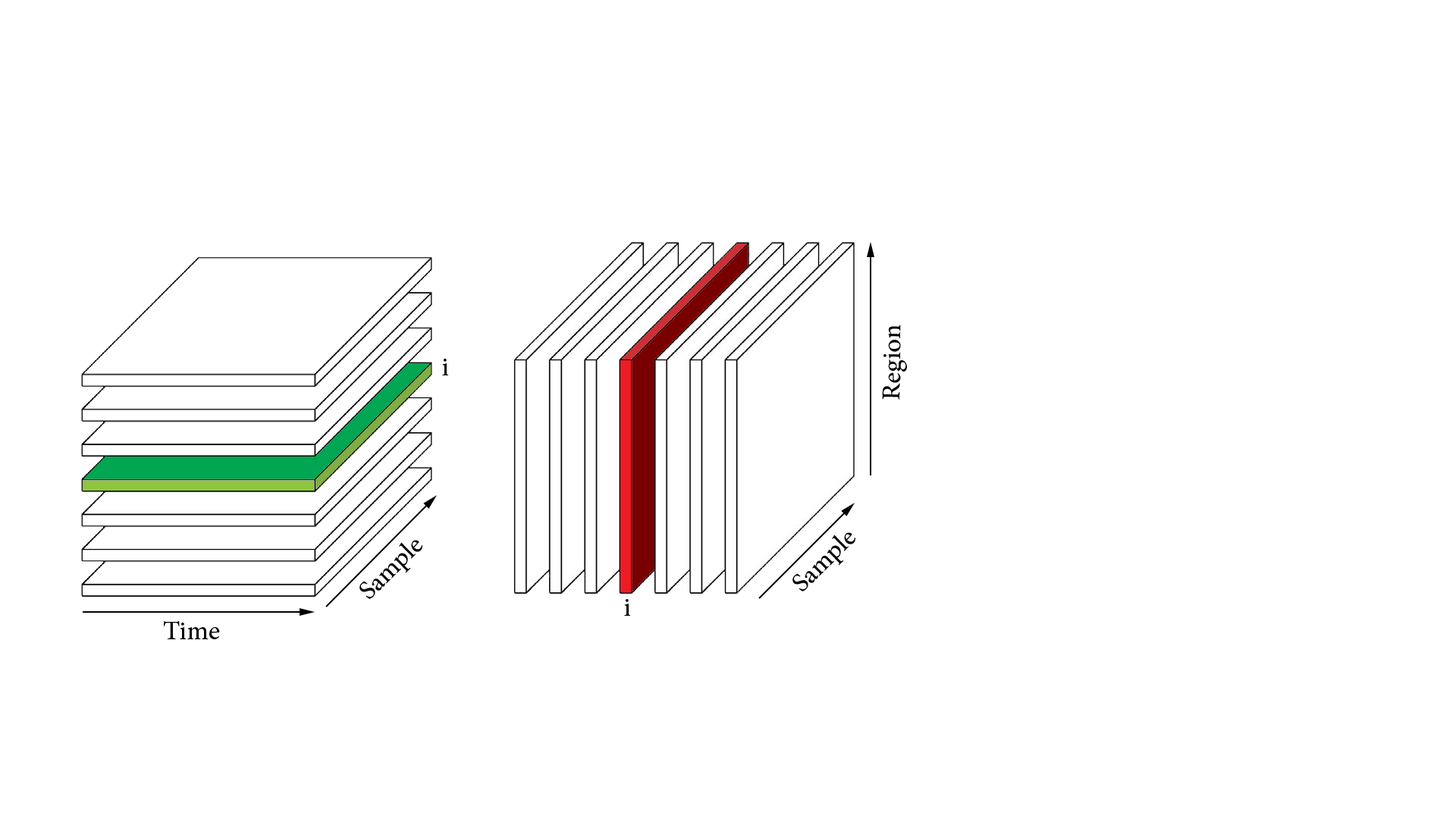
<style>
.page{position:relative;width:1456px;height:819px;background:#ffffff}
.page>*{position:absolute;margin:0}
.t1{font:36.4px "AdobeArabic-Regular";color:#010101}
.t2{font:36.4px "AdobeArabic-Regular";color:#000000}
</style>
<div class="page">
<p class="t1" style="left:882px;top:325px;width:25px;height:75px;rotate:-89deg">Region</p>
<p class="t2" style="left:442px;top:359px;width:6px;height:16px">i</p>
<p class="t1" style="left:792px;top:532px;width:63px;height:59px;rotate:-44deg">Sample</p>
<p class="t1" style="left:359px;top:540px;width:63px;height:59px;rotate:-44deg">Sample</p>
<p class="t2" style="left:624px;top:599px;width:6px;height:17px">i</p>
<p class="t1" style="left:163px;top:621px;width:57px;height:18px">Time</p>
</div>
